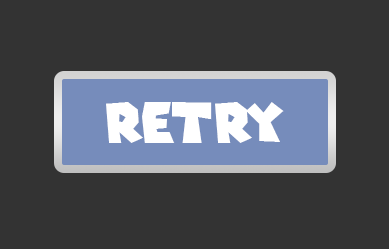
<style>
.page{position:relative;width:389px;height:249px;background:#333333}
.page>*{position:absolute;margin:0}
.t1{font:54.8px "SuperMarioGalaxy";color:#ffffff}
</style>
<div class="page">
<p class="t1" style="left:106px;top:102px;width:178px;height:41px">retry</p>
</div>
